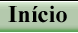
<style>
.page{position:relative;width:78px;height:33px;background:#b4c9ad}
.page>*{position:absolute;margin:0}
.t1{font:24px "TimesNewRomanPS-BoldMT";letter-spacing:0.005em;color:#000000}
</style>
<div class="page">
<p class="t1" style="left:8px;top:5px;width:59px;height:18px">Início</p>
</div>
